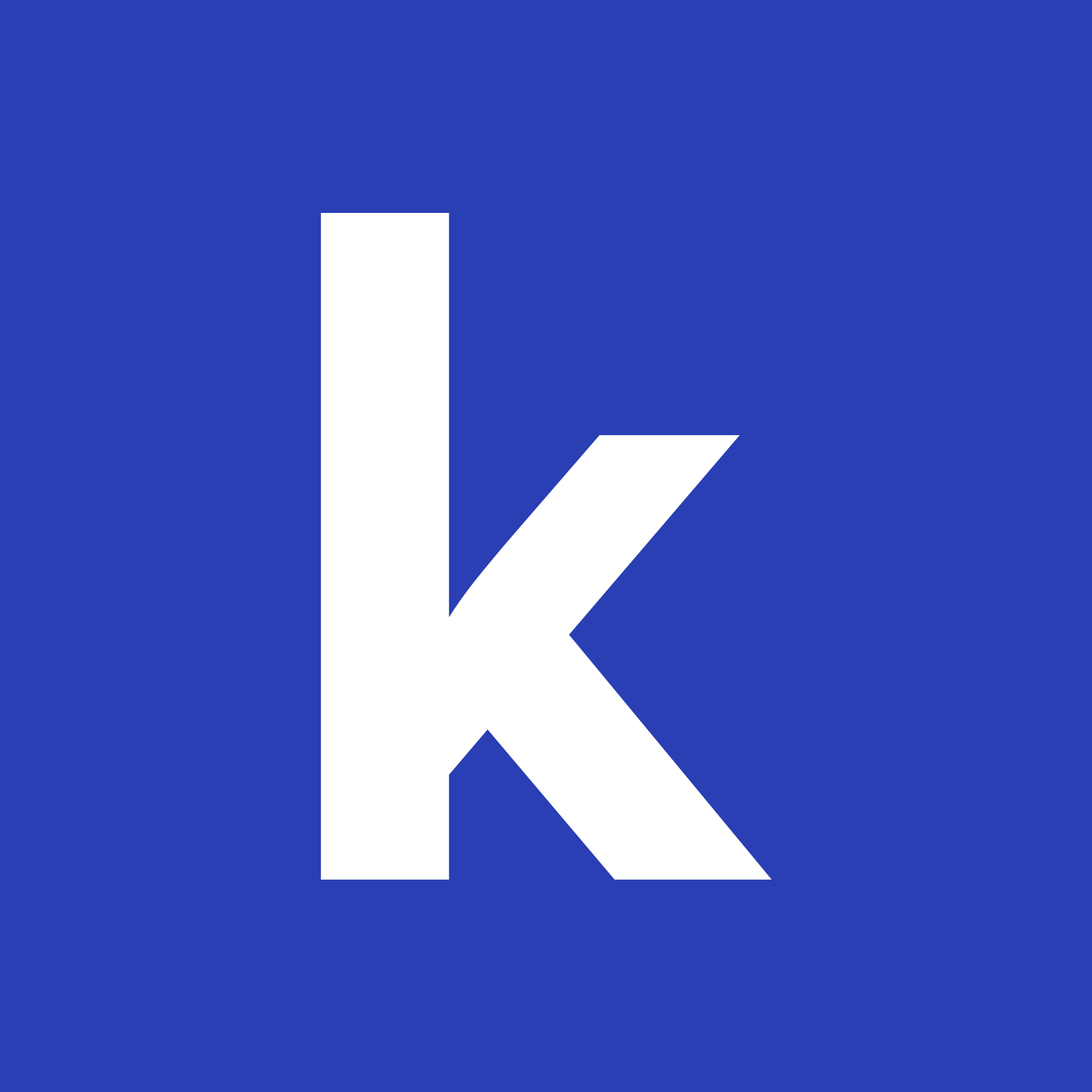
<style>
.page{position:relative;width:1092px;height:1092px;background:#2a3fb4}
.page>*{position:absolute;margin:0}
.t1{font:910px "KumbhSans-Bold";letter-spacing:-0.07em;color:#ffffff}
</style>
<div class="page">
<p class="t1" style="left:320px;top:213px;width:451px;height:667px">k</p>
</div>
